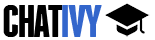
<style>
.page{position:relative;width:155px;height:40px;background:#ffffff}
.page>*{position:absolute;margin:0}
.t1{font:46.2px "Franchise-Bold";letter-spacing:-0.05em;color:#000000;scale:1.05 1}
.t2{font:46.2px "Franchise-Bold";letter-spacing:-0.05em;color:#3366cc;scale:1.05 1}
</style>
<div class="page">
<p class="t1" style="left:3px;top:5px;width:99px;height:32px">CHAT<span class="t2">IVY</span></p>
</div>
